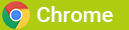
<style>
.page{position:relative;width:129px;height:30px;background:#b0cc10}
.page>*{position:absolute;margin:0}
.t1{font:21.3px "Roboto-Medium";color:#ffffff}
</style>
<div class="page">
<p class="t1" style="left:37px;top:6px;width:76px;height:16px">Chrome</p>
</div>
